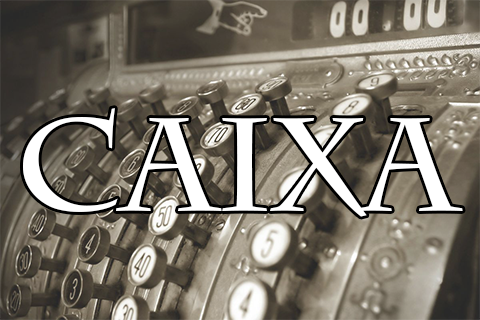
<style>
.page{position:relative;width:480px;height:320px}
.page>*{position:absolute;margin:0}
.t1{font:130px "CharlemagneStd-Bold";color:#ffffff}
</style>
<div class="page">
<p class="t1" style="left:23px;top:108px;width:440px;height:109px">CAIXA</p>
</div>
